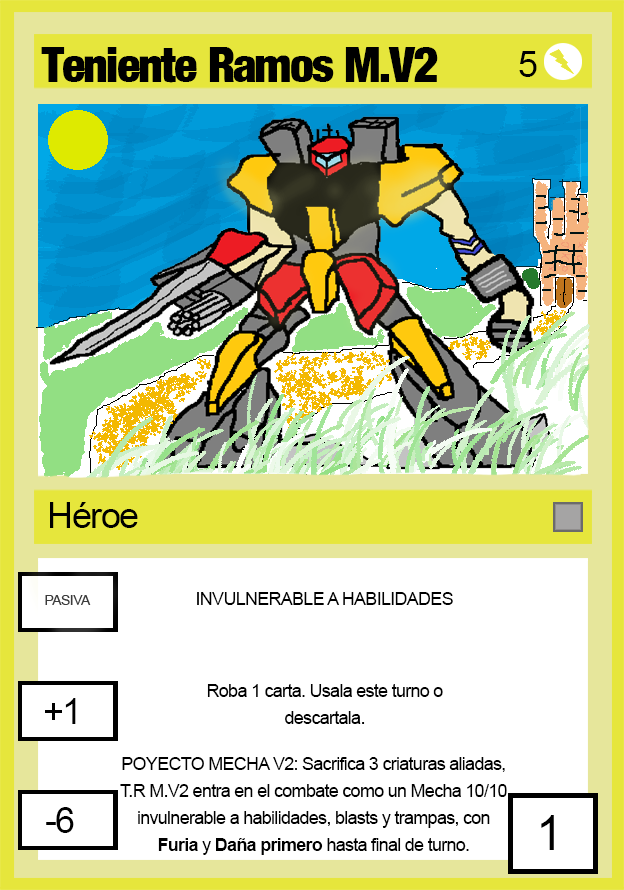
<style>
.page{position:relative;width:624px;height:890px;background:#ffffff}
.page>*{position:absolute;margin:0}
.t1{font:48px "Harvest";letter-spacing:-0.04em;color:#000000}
.t2{font:36px "ArialMT";letter-spacing:-0.04em;color:#000000}
.t3{font:18px "ArialMT";letter-spacing:-0.04em;color:#000000}
.t4{font:18px/27px "ArialMT";letter-spacing:-0.04em;color:#000000}
.t5{font:18px/27px "Arial-BoldMT";letter-spacing:-0.04em;color:#000000}
.t6{font:48px "ArialMT";letter-spacing:-0.04em;color:#000000}
</style>
<div class="page">
<p class="t1" style="left:41px;top:47px;width:397px;height:36px">Teniente Ramos M.V2</p>
<p class="t2" style="left:519px;top:51px;width:18px;height:26px">5</p>
<p class="t2" style="left:50px;top:502px;width:88px;height:26px">Héroe</p>
<p class="t3" style="left:197px;top:592px;width:256px;height:13px">INVULNERABLE A HABILIDADES</p>
<p class="t4" style="left:207px;top:684px;width:236px;height:40px;text-align:center">Roba 1 carta. Usala este turno o descartala.</p>
<p class="t2" style="left:45px;top:698px;width:31px;height:26px">+1</p>
<p class="t4" style="left:120px;top:757px;width:387px;height:98px;text-align:center">POYECTO MECHA V2: Sacrifica 3 criaturas aliadas, T.R M.V2 entra en el combate como un Mecha 10/10 invulnerable a habilidades, blasts y trampas, con <span class="t5">Furia</span> y <span class="t5">Daña primero</span> hasta final de turno.</p>
<p class="t2" style="left:46px;top:807px;width:28px;height:26px">-6</p>
<p class="t6" style="left:541px;top:815px;width:13px;height:35px">1</p>
</div>
